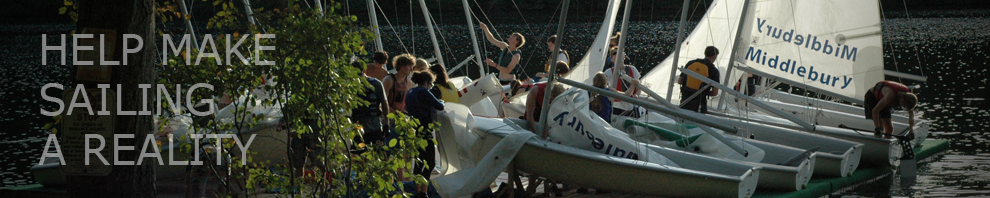
<style>
.page{position:relative;width:990px;height:198px}
.page>*{position:absolute;margin:0}
.t1{font:41.7px "Verdana";color:#858583}
</style>
<div class="page">
<p class="t1" style="left:38px;top:34px;width:238px;height:131px">HELP MAKE <br>SAILING <br>A REALITY</p>
</div>
